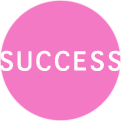
<style>
.page{position:relative;width:121px;height:121px;background:#f479c4}
.page>*{position:absolute;margin:0}
.t1{font:24px "Thonburi";letter-spacing:0.1em;color:#fefcfd;font-weight:bold}
</style>
<div class="page">
<p class="t1" style="left:0px;top:50px;width:121px;height:21px">SUCCESS</p>
</div>
